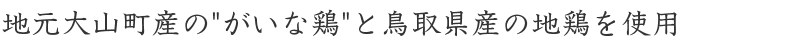
<style>
.page{position:relative;width:810px;height:40px;background:#ffffff}
.page>*{position:absolute;margin:0}
.t1{font:30px "UtrilloPro-M";color:#333333}
</style>
<div class="page">
<p class="t1" style="left:2px;top:9px;width:675px;height:28px">地元大山町産の"がいな鶏"と鳥取県産の地鶏を使用</p>
</div>
